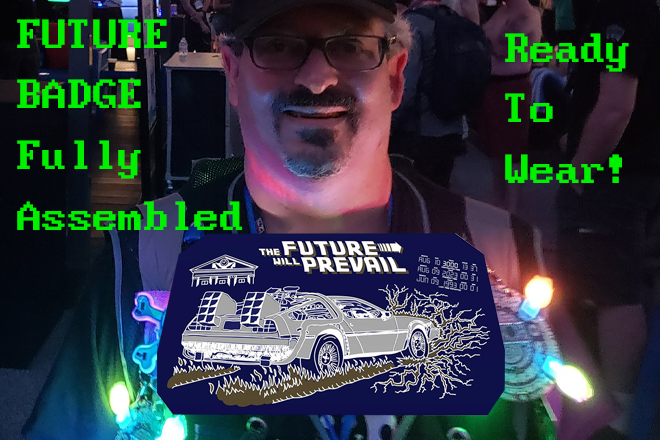
<style>
.page{position:relative;width:660px;height:440px}
.page>*{position:absolute;margin:0}
.t1{font:50.7px "Px437_ATT_PC6300";color:#00f000}
</style>
<div class="page">
<p class="t1" style="left:17px;top:19px;width:225px;height:211px">FUTURE<br>BADGE<br>Fully<br>Assembled</p>
<p class="t1" style="left:505px;top:33px;width:124px;height:150px">Ready<br>To<br>Wear!</p>
</div>
